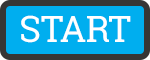
<style>
.page{position:relative;width:150px;height:60px;background:#00aeef}
.page>*{position:absolute;margin:0}
.t1{font:36.6px "RobotoSlab-Regular";letter-spacing:-0.01em;color:#ffffff}
</style>
<div class="page">
<p class="t1" style="left:21px;top:15px;width:110px;height:28px">START</p>
</div>
